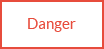
<style>
.page{position:relative;width:104px;height:49px;background:#ffffff}
.page>*{position:absolute;margin:0}
.t1{font:15px "Lato-Regular";color:#e74c3c}
</style>
<div class="page">
<p class="t1" style="left:28px;top:18px;width:48px;height:14px">Danger</p>
</div>
